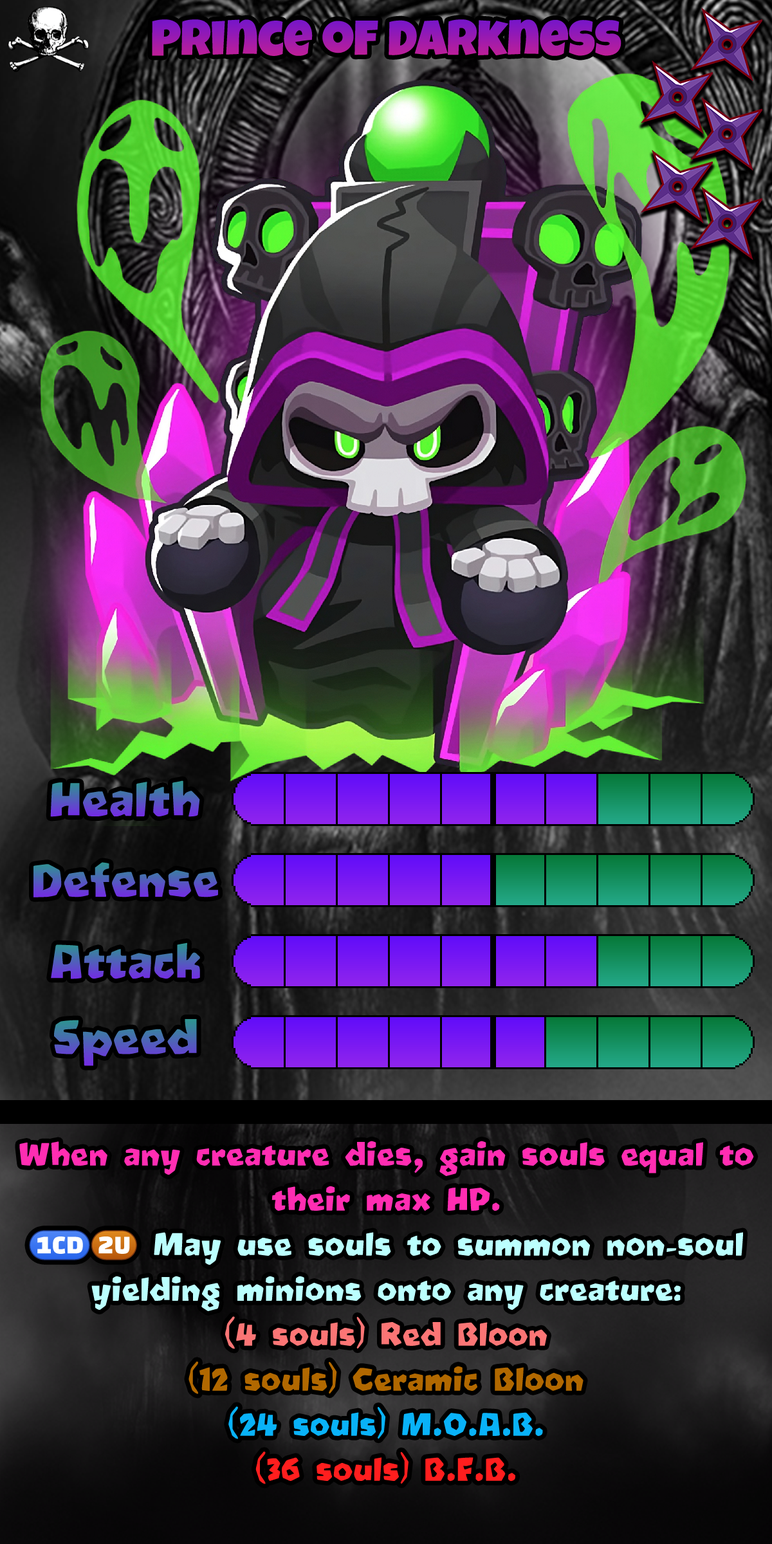
<style>
.page{position:relative;width:772px;height:1544px}
.page>*{position:absolute;margin:0}
.t1{font:85.6px "LuckiestGuy-Regular"}
.t2{font:77.2px "Oetztype"}
.t3{font:52.1px/45px "Oetztype";color:#bbfffe}
.t4{font:52.1px/45px "Oetztype";color:#ff2db2}
.t5{font:52.1px/45px "stoogedings-Regular";color:#bbfffe}
.t6{font:52.1px/45px "Oetztype";color:#ffffff}
.t7{font:52.1px/45px "Oetztype";color:#fb7575}
.t8{font:52.1px/45px "Oetztype";color:#b16800}
.t9{font:52.1px/45px "Oetztype";color:#09b2f8}
.t10{font:52.1px/45px "Oetztype";color:#ff1e1e}
</style>
<div class="page">
<p class="t1" style="left:152px;top:19px;width:470px;height:37px">Prince of Darkness</p>
<p class="t2" style="left:50px;top:781px;width:150px;height:36px">Health</p>
<p class="t2" style="left:33px;top:862px;width:185px;height:36px">Defense</p>
<p class="t2" style="left:51px;top:943px;width:149px;height:36px">Attack</p>
<p class="t2" style="left:54px;top:1019px;width:143px;height:47px">Speed</p>
<p class="t3" style="left:19px;top:1141px;width:735px;height:343px;text-align:center"><span class="t4">When any creature dies, gain souls equal to their max HP.<br></span><span class="t5">(1CD)(2U)</span> May use souls to summon non-soul yielding minions onto any creature:<span class="t6"><br></span><span class="t7">(4 souls) Red Bloon<br></span><span class="t8">(12 souls) Ceramic Bloon<br></span><span class="t9">(24 souls) M.O.A.B.<br></span><span class="t10">(36 souls) B.F.B.</span></p>
</div>
